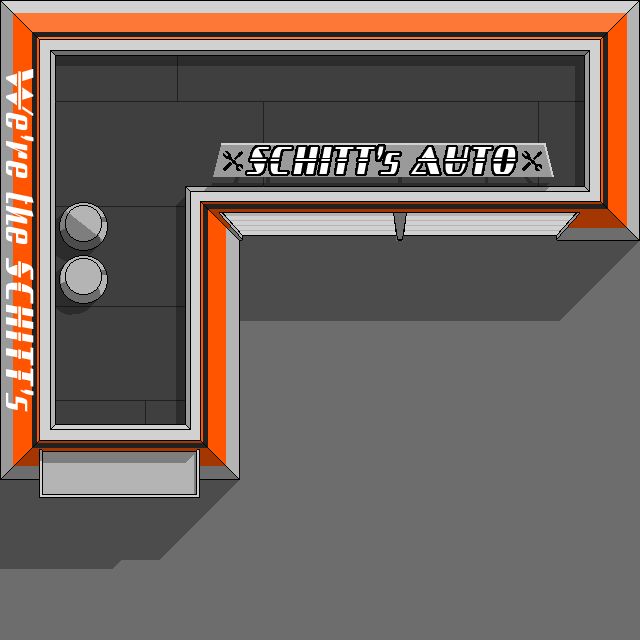
<style>
.page{position:relative;width:640px;height:640px;background:#6d6d6d}
.page>*{position:absolute;margin:0}
.t1{font:36px "Sandoval";letter-spacing:0.1em;color:#ffffff}
</style>
<div class="page">
<p class="t1" style="left:6px;top:69px;width:28px;height:343px;rotate:90deg">We’re the SCHITT’s</p>
<p class="t1" style="left:247px;top:146px;width:269px;height:28px">SCHITT’s AUTO</p>
</div>
